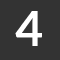
<style>
.page{position:relative;width:60px;height:60px;background:#333333}
.page>*{position:absolute;margin:0}
.t1{font:48px "Lato-Bold";color:#ffffff}
</style>
<div class="page">
<p class="t1" style="left:15px;top:11px;width:27px;height:35px">4</p>
</div>
